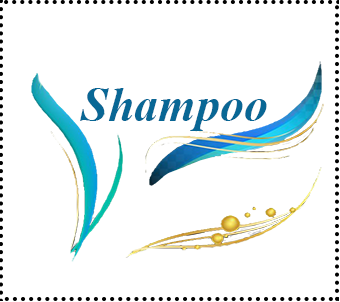
<style>
.page{position:relative;width:340px;height:302px;background:#ffffff}
.page>*{position:absolute;margin:0}
.t1{font:48px "TimesNewRomanPS-BoldItalicMT";color:#096795}
</style>
<div class="page">
<p class="t1" style="left:80px;top:88px;width:187px;height:43px">Shampoo</p>
</div>
